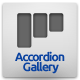
<style>
.page{position:relative;width:80px;height:80px}
.page>*{position:absolute;margin:0}
.t1{font:12px/10px "Ubuntu-Bold";letter-spacing:-0.075em;color:#0b43a0}
</style>
<div class="page">
<p class="t1" style="left:15px;top:51px;width:50px;height:23px;text-align:center">Accordion <br>Gallery</p>
</div>
